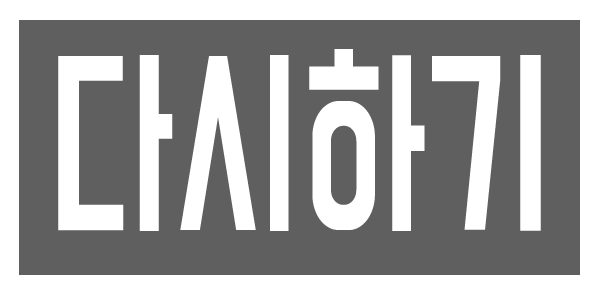
<style>
.page{position:relative;width:600px;height:300px;background:#5f5f5f}
.page>*{position:absolute;margin:0}
.t1{font:185.6px "BMDoHyeon";color:#ffffff;scale:0.71 1}
</style>
<div class="page">
<p class="t1" style="left:58px;top:49px;width:483px;height:182px">다시하기</p>
</div>
